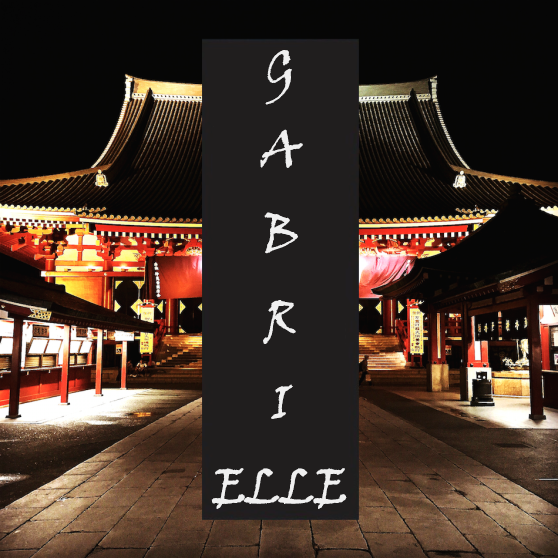
<style>
.page{position:relative;width:558px;height:558px}
.page>*{position:absolute;margin:0}
.t1{font:48px "VinerHandITC";color:#f0f0f0}
</style>
<div class="page">
<p class="t1" style="left:211px;top:50px;width:136px;height:459px;text-align:center">G<br>A<br>B<br>R<br>I<br>ELLE</p>
</div>
